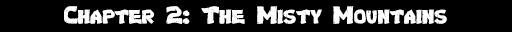
<style>
.page{position:relative;width:512px;height:32px;background:#000000}
.page>*{position:absolute;margin:0}
.t1{font:24px "Turtles";color:#ffffff}
</style>
<div class="page">
<p class="t1" style="left:64px;top:6px;width:383px;height:18px">Chapter 2: The Misty Mountains</p>
</div>
